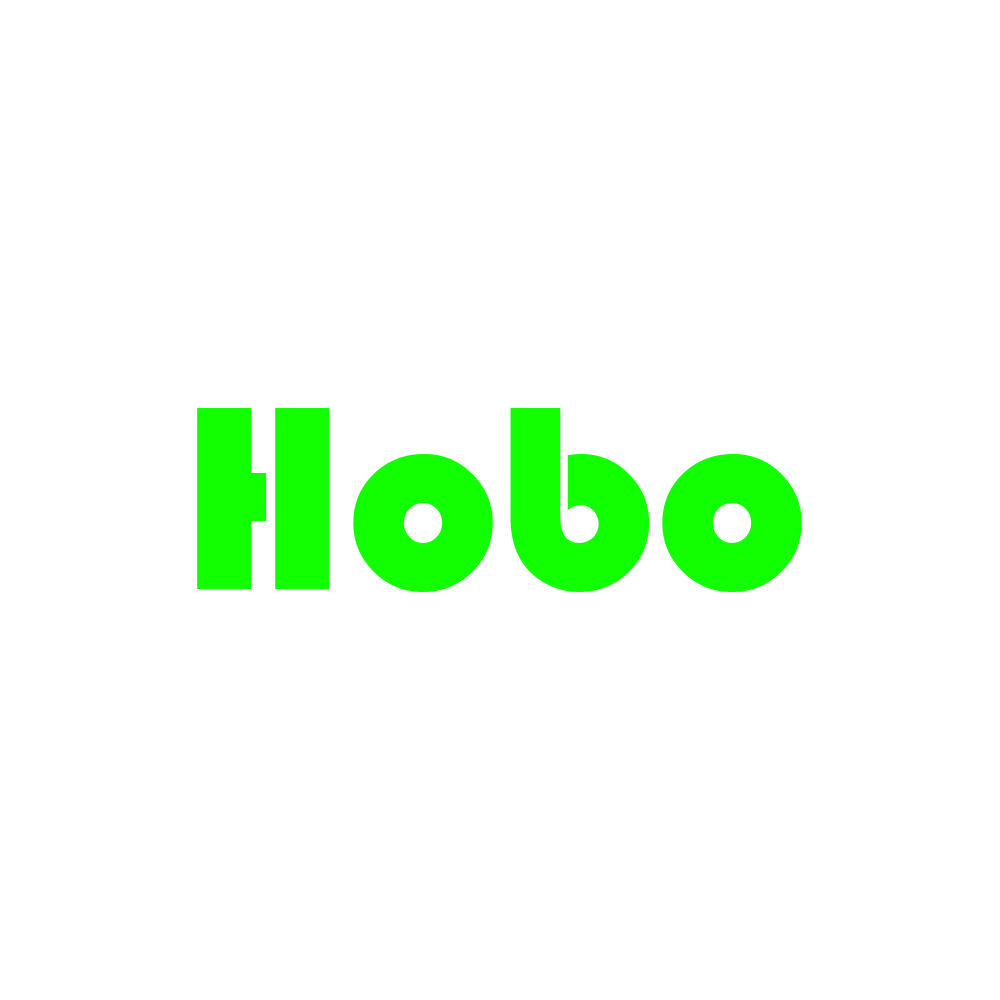
<style>
.page{position:relative;width:1000px;height:1000px;background:#ffffff}
.page>*{position:absolute;margin:0}
.t1{font:272px "Bauhaus93";color:#11ff00}
</style>
<div class="page">
<p class="t1" style="left:197px;top:408px;width:605px;height:184px">Hobo</p>
</div>
